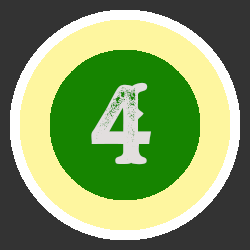
<style>
.page{position:relative;width:250px;height:250px;background:#333333}
.page>*{position:absolute;margin:0}
.t1{font:125px "Docktrin";color:#e2dede}
</style>
<div class="page">
<p class="t1" style="left:91px;top:82px;width:60px;height:83px">4</p>
</div>
